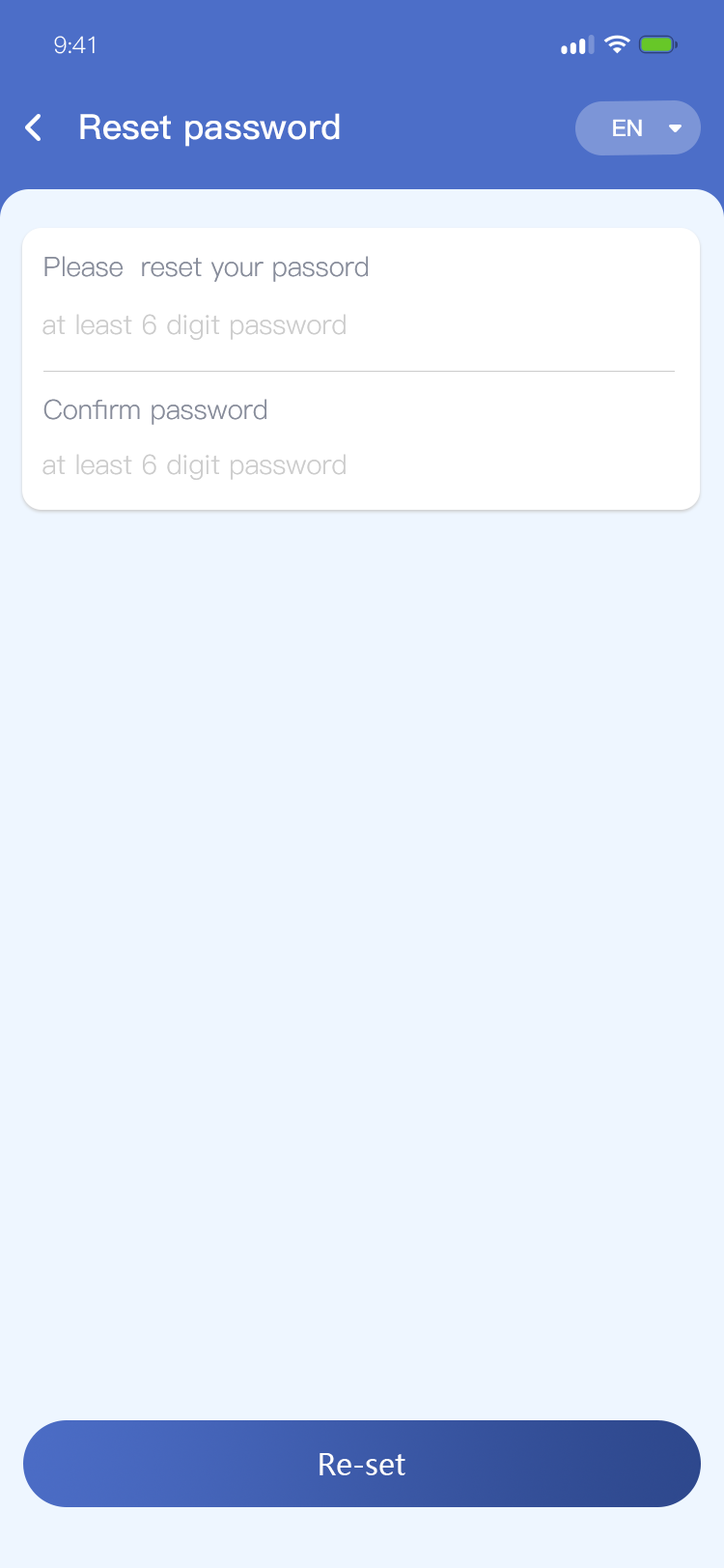
<style>
.page{position:relative;width:724px;height:1568px;background:#eef6ff}
.page>*{position:absolute;margin:0}
.t1{font:23.2px "PingFang-SC-Regular";letter-spacing:-0.025em;color:#ffffff}
.t2{font:34.8px "PingFang-SC-Bold";color:#feffff}
.t3{font:34.8px "PingFang-SC-Bold";color:#feffff;text-transform:uppercase}
.t4{font:23.2px "PingFang-SC-Bold";color:#ffffff}
.t5{font:27px "PingFang-SC-Regular";color:#878c9a}
.t6{font:27px "PingFang-SC-Regular";color:#878c9a;text-transform:uppercase}
.t7{font:27px "PingFang-SC-Regular";color:#cccccc}
.t8{font:29px "MicrosoftYaHei";color:#ffffff}
</style>
<div class="page">
<p class="t1" style="left:54px;top:36px;width:41px;height:18px">9:41</p>
<p class="t2" style="left:80px;top:113px;width:260px;height:34px"><span class="t3">r</span>eset password</p>
<p class="t4" style="left:613px;top:119px;width:29px;height:17px">EN</p>
<p class="t5" style="left:44px;top:256px;width:324px;height:26px"><span class="t6">p</span>lease  reset your passord</p>
<p class="t7" style="left:42px;top:314px;width:304px;height:26px">at least 6 digit password</p>
<p class="t5" style="left:43px;top:399px;width:223px;height:26px"><span class="t6">c</span>onfirm password</p>
<p class="t7" style="left:42px;top:454px;width:304px;height:26px">at least 6 digit password</p>
<p class="t8" style="left:320px;top:1453px;width:86px;height:22px">Re-set</p>
</div>
